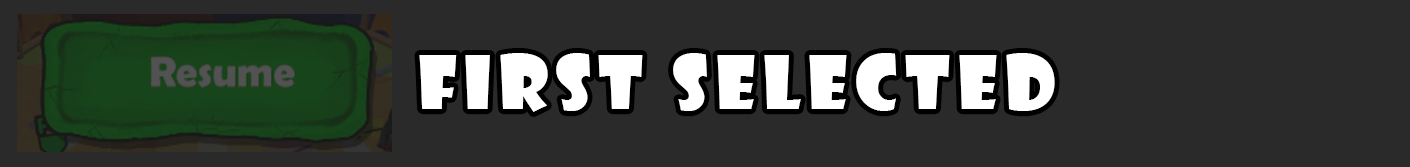
<style>
.page{position:relative;width:1410px;height:167px;background:#2a2a2a}
.page>*{position:absolute;margin:0}
.t1{font:72px "ShowcardGothic-Reg";letter-spacing:0.1em;color:#ffffff}
</style>
<div class="page">
<p class="t1" style="left:419px;top:53px;width:636px;height:59px">First Selected</p>
</div>
